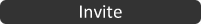
<style>
.page{position:relative;width:201px;height:24px;background:#333333}
.page>*{position:absolute;margin:0}
.t1{font:19.2px "Calibri";color:#ffffff}
</style>
<div class="page">
<p class="t1" style="left:80px;top:5px;width:42px;height:13px">Invite</p>
</div>
